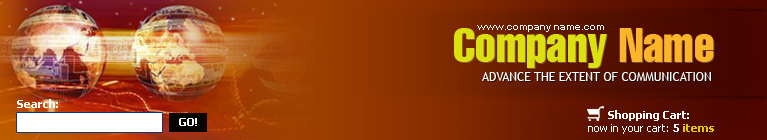
<style>
.page{position:relative;width:767px;height:140px}
.page>*{position:absolute;margin:0}
.t1{font:48px "AGLettericaCompressed-Roman";color:#dbe10f}
.t2{font:48px "AGLettericaCompressed-Roman";color:#fcb529}
.t3{font:10px "Arial-BoldMT";color:#ffffff}
.t4{font:12px "UltraVertex6";color:#ffffff;text-transform:uppercase}
.t5{font:11px "Tahoma-Bold";color:#ffffff}
.t6{font:11px "Tahoma-Bold";color:#fefdfd;text-transform:uppercase}
.t7{font:11px "Tahoma";color:#ffffff}
.t8{font:11px "Tahoma-Bold";color:#fcfcfa}
.t9{font:11px "Tahoma-Bold";color:#ddcb03}
</style>
<div class="page">
<p class="t1" style="left:454px;top:28px;width:260px;height:40px">Company <span class="t2">Name</span></p>
<p class="t3" style="left:477px;top:25px;width:127px;height:7px">www.company name.com</p>
<p class="t4" style="left:482px;top:72px;width:229px;height:9px">Advance the extent of communication</p>
<p class="t5" style="left:17px;top:99px;width:41px;height:9px">Search:</p>
<p class="t5" style="left:608px;top:110px;width:81px;height:11px">Shopping Cart:</p>
<p class="t6" style="left:179px;top:118px;width:18px;height:8px">GO!</p>
<p class="t7" style="left:588px;top:124px;width:126px;height:10px">now in your cart: <span class="t8">5</span><span class="t9"> items</span></p>
</div>
